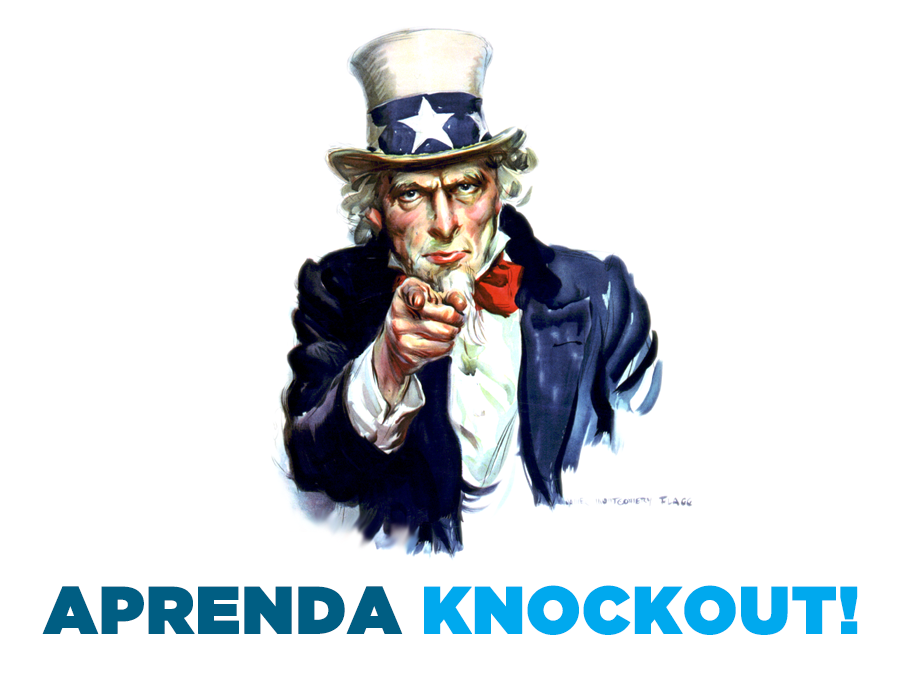
<style>
.page{position:relative;width:900px;height:700px;background:#ffffff}
.page>*{position:absolute;margin:0}
.t1{font:66.7px "GothamUltra";color:#00a9ee;font-weight:bold}
.t2{font:66.7px "GothamUltra";color:#005e83;font-weight:bold}
</style>
<div class="page">
<p class="t1" style="left:42px;top:585px;width:816px;height:50px"><span class="t2">APRENDA </span>KNOCKOUT!</p>
</div>
